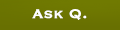
<style>
.page{position:relative;width:120px;height:30px}
.page>*{position:absolute;margin:0}
.t1{font:16.7px "Copperplate";color:#ffffff;font-weight:bold}
</style>
<div class="page">
<p class="t1" style="left:32px;top:9px;width:55px;height:11px">Ask Q.</p>
</div>
